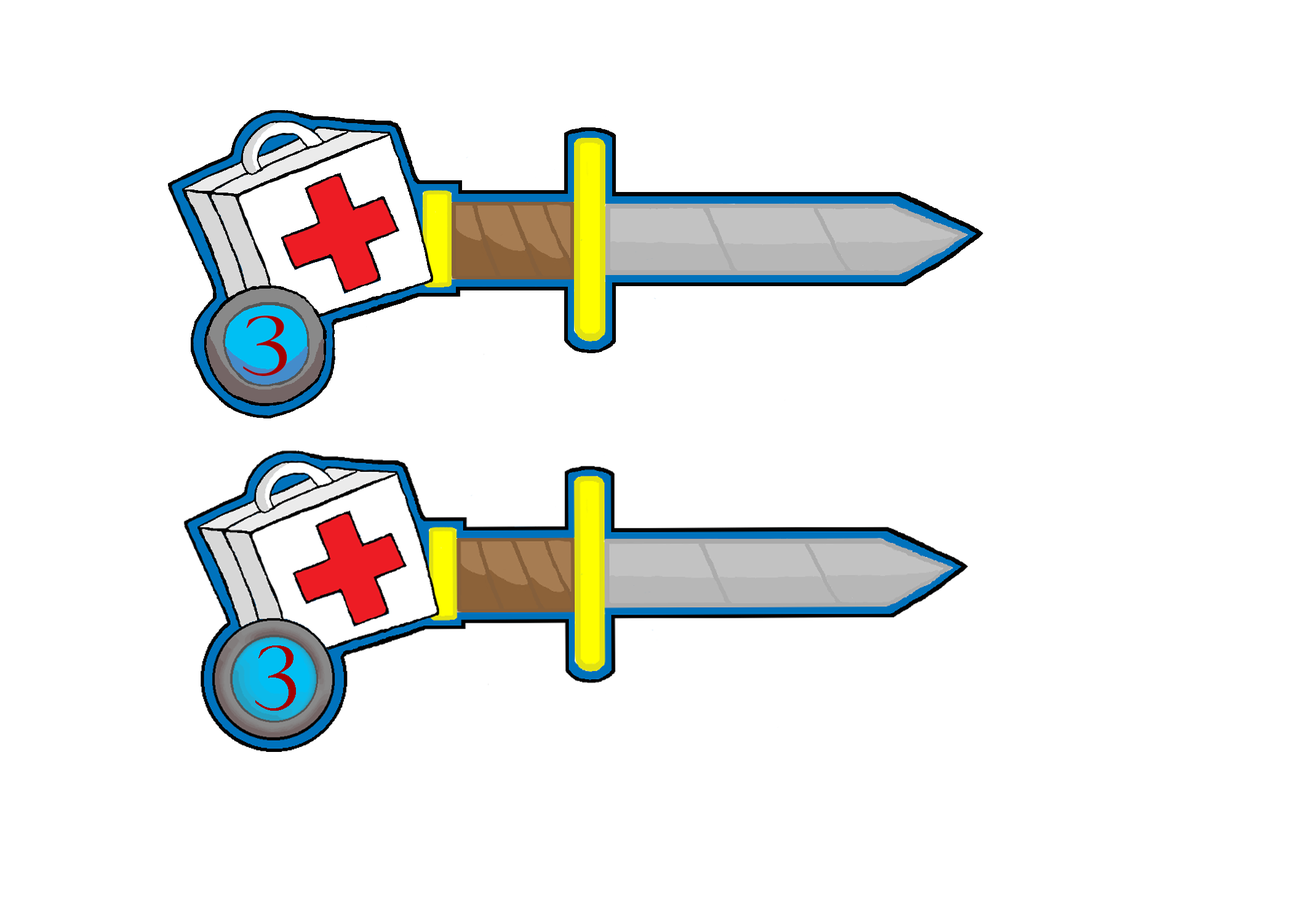
<style>
.page{position:relative;width:1292px;height:923px;background:#ffffff}
.page>*{position:absolute;margin:0}
.t1{font:87.1px "FelixTitlingMT";color:#a40101}
</style>
<div class="page">
<p class="t1" style="left:255px;top:645px;width:41px;height:66px">3</p>
</div>
